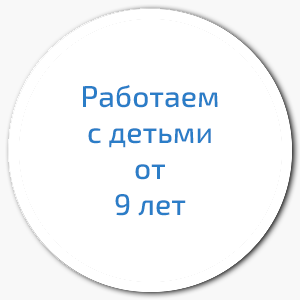
<style>
.page{position:relative;width:300px;height:300px;background:#ffffff}
.page>*{position:absolute;margin:0}
.t1{font:30px "Exo2-Medium";color:#2b7dc7}
</style>
<div class="page">
<p class="t1" style="left:83px;top:84px;width:135px;height:132px;text-align:center">Работаем<br>с детьми<br>от<br>9 лет</p>
</div>
